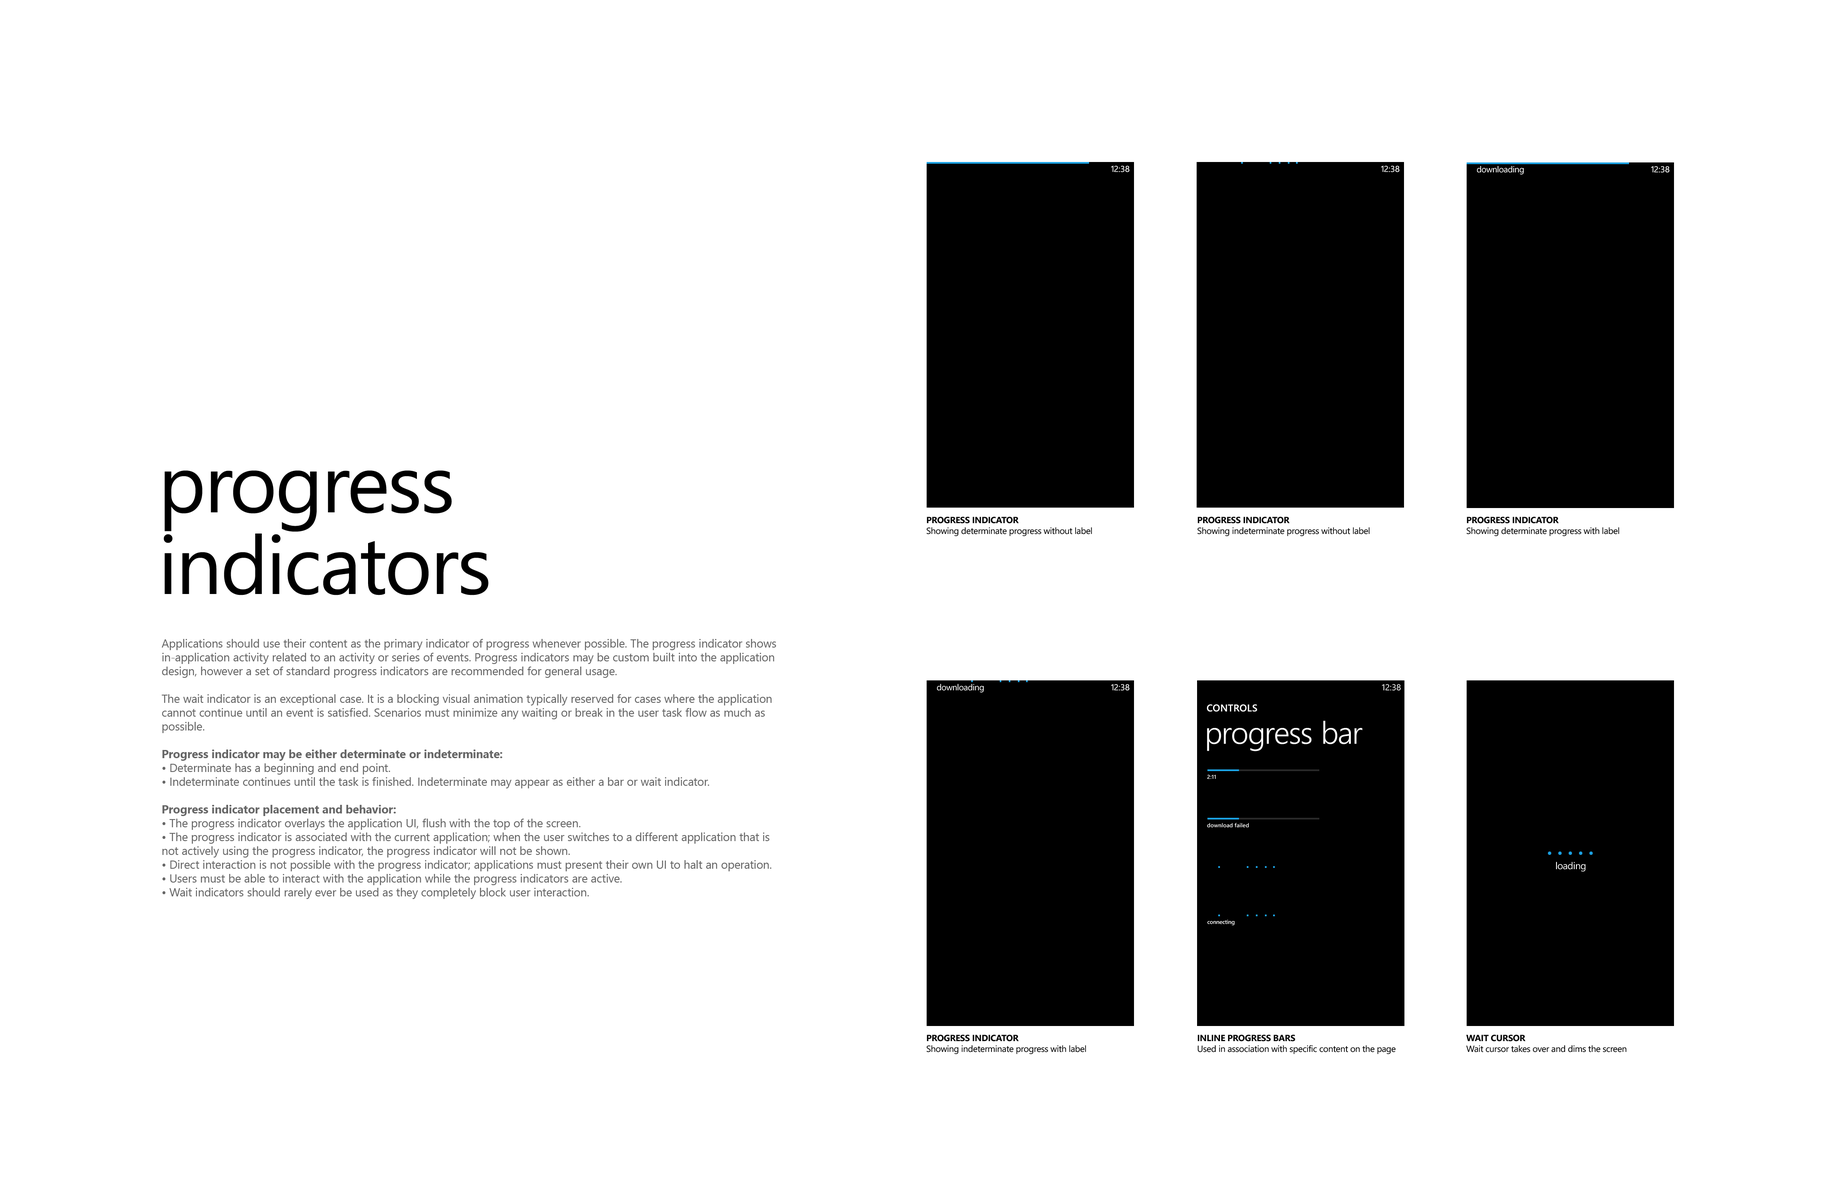
<style>
.page{position:relative;width:1836px;height:1188px;background:#ffffff}
.page>*{position:absolute;margin:0}
.t1{font:8.6px "SegoeWP";color:#ffffff}
.t2{font:8.6px "SegoeWP";letter-spacing:-0.05em;color:#ffffff}
.t3{font:8.6px "SegoeWP";letter-spacing:-0.025em;color:#ffffff}
.t4{font:81.8px/81.8px "SegoeWP";letter-spacing:-0.025em;color:#000000}
.t5{font:9px "SegoeWP";letter-spacing:-0.025em;color:#000000}
.t6{font:9px "SegoeWP-Bold";letter-spacing:-0.025em;color:#000000;text-transform:uppercase}
.t7{font:11.5px "SegoeUI";color:#666666}
.t8{font:11.5px "SegoeUI-Bold";color:#666666}
.t9{font:9.8px "SegoeWP-Semibold";letter-spacing:0.025em;color:#ffffff;text-transform:uppercase}
.t10{font:31.1px "SegoeWP-SemiLight";letter-spacing:-0.01em;color:#ffffff}
.t11{font:5.8px "SegoeWP-Semibold";color:#ffffff}
.t12{font:9.8px "SegoeWP";letter-spacing:-0.025em;color:#ffffff}
.t13{font:5.8px "SegoeWP-Semibold";letter-spacing:-0.025em;color:#ffffff}
</style>
<div class="page">
<p class="t1" style="left:1111px;top:165px;width:19px;height:7px"><span class="t2">1</span>2:38</p>
<p class="t1" style="left:1381px;top:165px;width:19px;height:7px"><span class="t2">1</span>2:38</p>
<p class="t3" style="left:1477px;top:166px;width:47px;height:9px">downloading</p>
<p class="t1" style="left:1651px;top:166px;width:19px;height:7px"><span class="t2">1</span>2:38</p>
<p class="t4" style="left:164px;top:470px;width:325px;height:125px">progress<br>indicators</p>
<p class="t5" style="left:927px;top:517px;width:165px;height:19px"><span class="t6">progress indicator<br></span>Showing determinate progress without label</p>
<p class="t5" style="left:1198px;top:517px;width:172px;height:20px"><span class="t6">progress indicator<br></span>Showing indeterminate progress without label</p>
<p class="t5" style="left:1467px;top:517px;width:152px;height:19px"><span class="t6">progress indicator<br></span>Showing determinate progress with label</p>
<p class="t7" style="left:162px;top:639px;width:614px;height:260px">Applications should use their content as the primary indicator of progress whenever possible. The progress indicator shows in-application activity related to an activity or series of events. Progress indicators may be custom built into the application design, however a set of standard progress indicators are recommended for general usage.<br><br>The wait indicator is an exceptional case. It is a blocking visual animation typically reserved for cases where the application cannot continue until an event is satisfied. Scenarios must minimize any waiting or break in the user task flow as much as possible.<br><br><span class="t8">Progress indicator may be either determinate or indeterminate: <br></span>• Determinate has a beginning and end point.<br>• Indeterminate continues until the task is finished. Indeterminate may appear as either a bar or wait indicator.  <br><span class="t8"><br>Progress indicator placement and behavior:<br></span>• The progress indicator overlays the application UI, flush with the top of the screen.<br>• The progress indicator is associated with the current application; when the user switches to a different application that is not actively using the progress indicator, the progress indicator will not be shown. <br>• Direct interaction is not possible with the progress indicator; applications must present their own UI to halt an operation.<br>• Users must be able to interact with the application while the progress indicators are active.<br>• Wait indicators should rarely ever be used as they completely block user interaction.</p>
<p class="t3" style="left:937px;top:684px;width:47px;height:8px">downloading</p>
<p class="t1" style="left:1111px;top:684px;width:19px;height:7px"><span class="t2">1</span>2:38</p>
<p class="t1" style="left:1382px;top:684px;width:19px;height:7px">12:38</p>
<p class="t9" style="left:1207px;top:704px;width:50px;height:8px">controls</p>
<p class="t10" style="left:1207px;top:721px;width:156px;height:30px">progress bar</p>
<p class="t11" style="left:1207px;top:775px;width:9px;height:4px">2:11</p>
<p class="t11" style="left:1207px;top:823px;width:42px;height:5px">download failed</p>
<p class="t12" style="left:1556px;top:862px;width:29px;height:10px">loading</p>
<p class="t13" style="left:1207px;top:920px;width:28px;height:5px">connecting</p>
<p class="t5" style="left:927px;top:1035px;width:159px;height:20px"><span class="t6">progress indicator<br></span>Showing indeterminate progress with label</p>
<p class="t5" style="left:1198px;top:1035px;width:198px;height:19px"><span class="t6">inline progress bars<br></span>Used in association with specific content on the page</p>
<p class="t5" style="left:1466px;top:1035px;width:160px;height:17px"><span class="t6">WAIT CURSOR<br></span>Wait cursor takes over and dims the screen</p>
</div>
